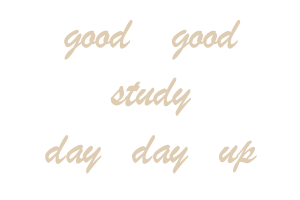
<style>
.page{position:relative;width:300px;height:200px;background:#ffffff}
.page>*{position:absolute;margin:0}
.t1{font:48px "STXingkai";letter-spacing:-0.02em;color:#decdb3}
</style>
<div class="page">
<p class="t1" style="left:45px;top:19px;width:212px;height:155px;text-align:center">good    good   study<br>day   day   up</p>
</div>
